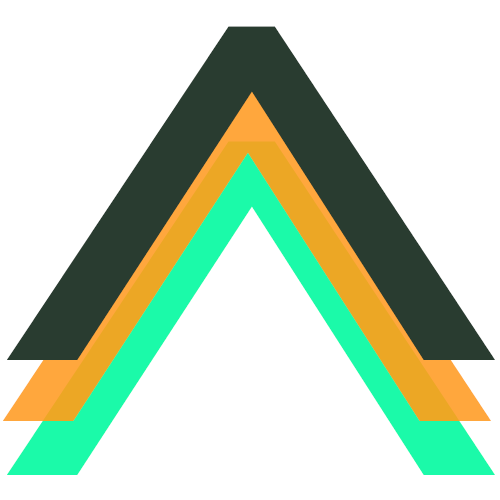
<style>
.page{position:relative;width:500px;height:500px;background:#ffffff}
.page>*{position:absolute;margin:0}
.t1{font:473.7px "PirulenRg-Regular";letter-spacing:-0.02em;color:#293c30}
.t2{font:473.7px "PirulenRg-Regular";letter-spacing:-0.02em}
</style>
<div class="page">
<p class="t1" style="left:7px;top:26px;width:488px;height:334px">a</p>
<p class="t1" style="left:7px;top:33px;width:488px;height:334px">a</p>
<p class="t1" style="left:7px;top:33px;width:488px;height:334px">a</p>
<p class="t2" style="left:3px;top:84px;width:488px;height:334px">a</p>
<p class="t2" style="left:3px;top:84px;width:488px;height:334px">a</p>
<p class="t2" style="left:3px;top:87px;width:488px;height:334px">a</p>
<p class="t2" style="left:7px;top:135px;width:488px;height:334px">a</p>
<p class="t2" style="left:7px;top:135px;width:488px;height:334px">a</p>
<p class="t2" style="left:7px;top:141px;width:488px;height:334px">a</p>
</div>
